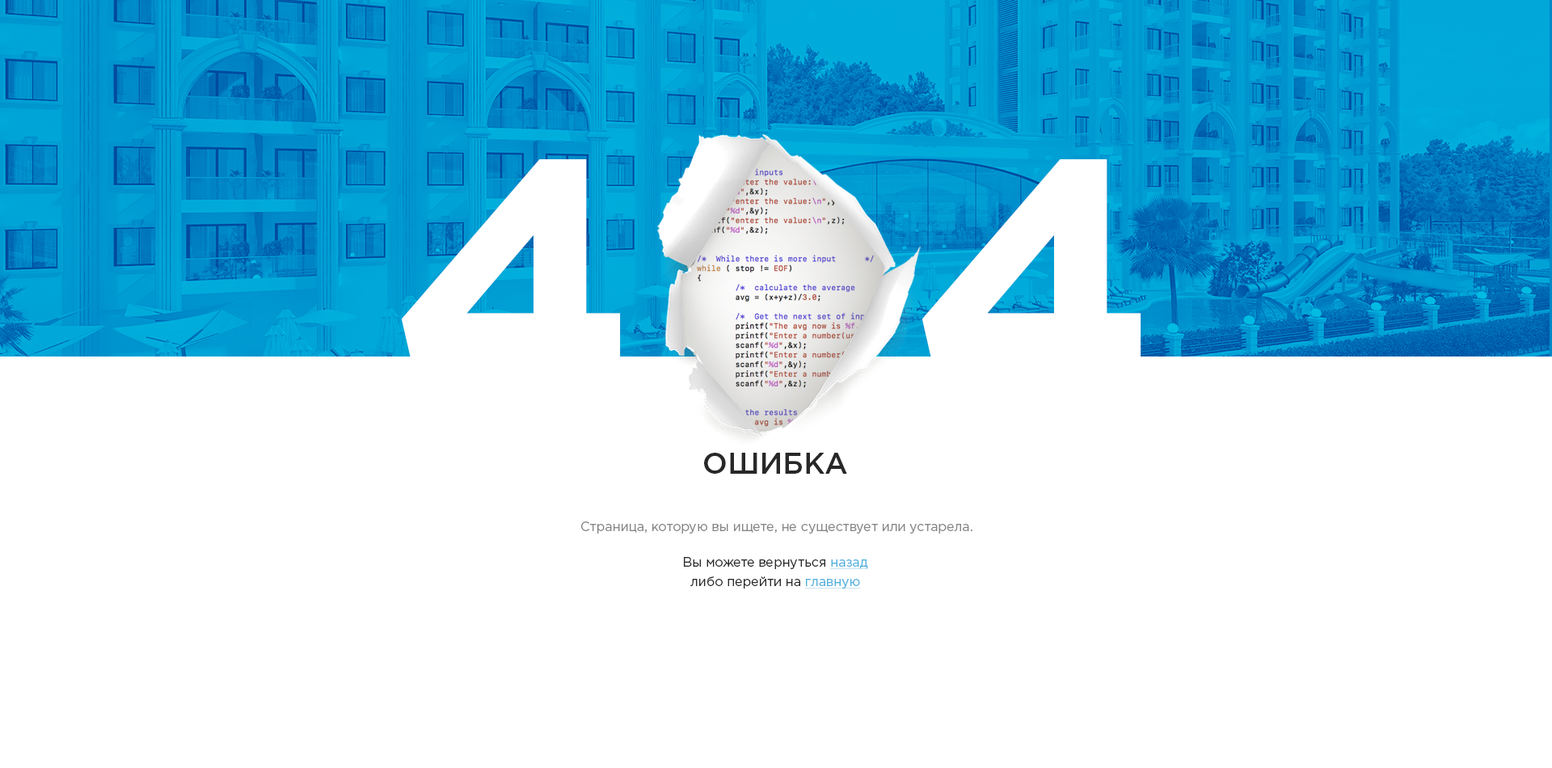
<style>
.page{position:relative;width:1552px;height:768px;background:#ffffff}
.page>*{position:absolute;margin:0}
.t1{font:359.3px "GothamPro-Bold";color:#ffffff}
.t2{font:29.1px "GothamPro-Medium";color:#282828;text-transform:uppercase}
.t3{font:12.9px "GothamPro";color:#858585}
.t4{font:12.9px/19.4px "GothamPro";color:#282828}
.t5{font:12.9px/19.4px "GothamPro";color:#4eb0dd;text-decoration:underline}
</style>
<div class="page">
<p class="t1" style="left:401px;top:159px;width:741px;height:253px">4  4</p>
<p class="t2" style="left:704px;top:453px;width:143px;height:21px">ошибка</p>
<p class="t3" style="left:581px;top:522px;width:392px;height:12px">Страница, которую вы ищете, не существует или устарела.</p>
<p class="t4" style="left:684px;top:557px;width:184px;height:32px;text-align:center">Вы можете вернуться <span class="t5">назад<br></span>либо перейти на <span class="t5">главную</span></p>
</div>
